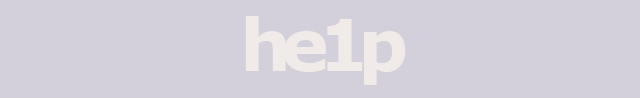
<style>
.page{position:relative;width:640px;height:98px;background:#d4d0db}
.page>*{position:absolute;margin:0}
.t1{font:72px "Verdana-Bold";letter-spacing:-0.15em;color:#f0ebe8}
</style>
<div class="page">
<p class="t1" style="left:245px;top:16px;width:161px;height:69px">he1p</p>
</div>
